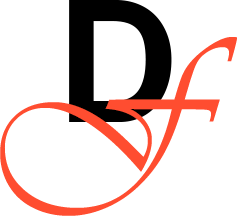
<style>
.page{position:relative;width:237px;height:216px;background:#ffffff}
.page>*{position:absolute;margin:0}
.t1{font:181px "CoolveticaRg-Regular";color:#000000}
.t2{font:188.5px "Vivaldii";color:#ff4d30}
</style>
<div class="page">
<p class="t1" style="left:69px;top:0px;width:103px;height:122px">D</p>
<p class="t2" style="left:0px;top:37px;width:237px;height:179px">F</p>
</div>
